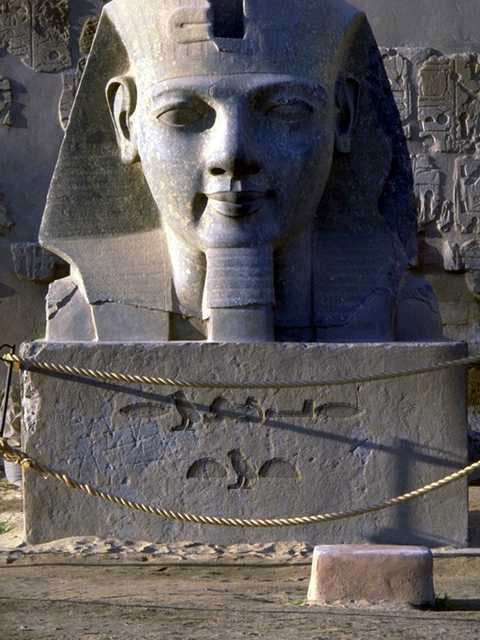
<style>
.page{position:relative;width:480px;height:640px}
.page>*{position:absolute;margin:0}
.t1{font:48px "EgyptianHieroglyphsSilhouette"}
</style>
<div class="page">
<p class="t1" style="left:122px;top:393px;width:241px;height:97px;text-align:center">Ruler<br>Tut</p>
</div>
